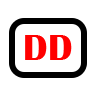
<style>
.page{position:relative;width:96px;height:96px;background:#ffffff}
.page>*{position:absolute;margin:0}
.t1{font:37px "BritannicBold";color:#ff0000}
</style>
<div class="page">
<p class="t1" style="left:25px;top:35px;width:47px;height:25px">DD</p>
</div>
